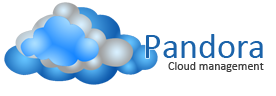
<style>
.page{position:relative;width:276px;height:96px;background:#ffffff}
.page>*{position:absolute;margin:0}
.t1{font:36px "Calibri";color:#1b63aa}
.t2{font:12px "Calibri";color:#3e3e3e}
</style>
<div class="page">
<p class="t1" style="left:146px;top:34px;width:117px;height:24px">Pandora</p>
<p class="t2" style="left:168px;top:62px;width:96px;height:10px">Cloud management</p>
</div>
